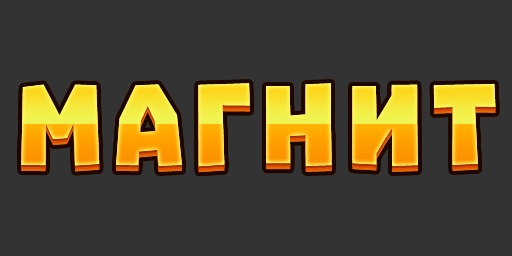
<style>
.page{position:relative;width:512px;height:256px;background:#333333}
.page>*{position:absolute;margin:0}
.t1{font:129.3px "Troika";letter-spacing:0.06em}
</style>
<div class="page">
<p class="t1" style="left:21px;top:83px;width:475px;height:84px">МАГНИТ</p>
</div>
